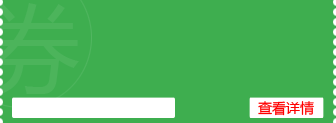
<style>
.page{position:relative;width:336px;height:123px;background:#3eae4f}
.page>*{position:absolute;margin:0}
.t1{font:14px "MicrosoftYaHei";color:#ff0000}
</style>
<div class="page">
<p class="t1" style="left:258px;top:101px;width:56px;height:15px">查看详情</p>
</div>
